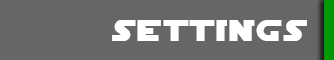
<style>
.page{position:relative;width:334px;height:60px;background:#666666}
.page>*{position:absolute;margin:0}
.t1{font:31px "SFDistantGalaxyAlternate";letter-spacing:0.12em;color:#ffffff}
</style>
<div class="page">
<p class="t1" style="left:112px;top:20px;width:195px;height:21px">settings</p>
</div>
